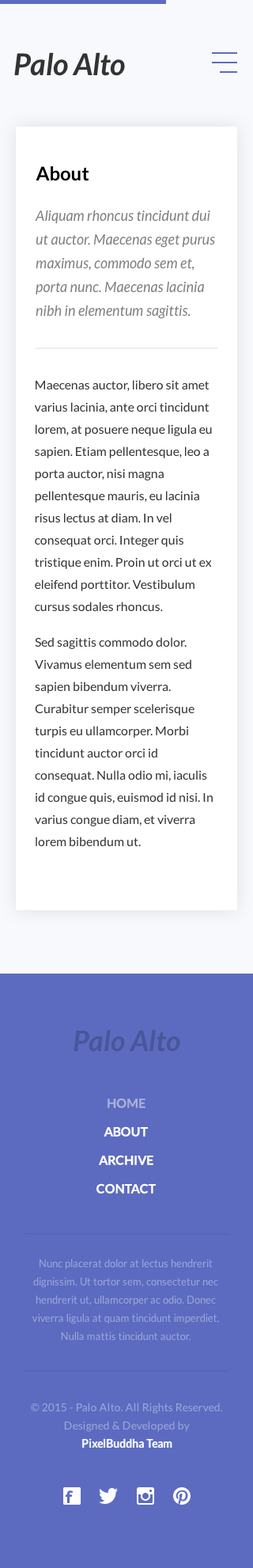
<style>
.page{position:relative;width:253px;height:1568px;background:#ffffff}
.page>*{position:absolute;margin:0}
.t1{font:30.1px "Lato-BoldItalic";color:#333333}
.t2{font:19px "Lato-Bold";color:#000000}
.t3{font:14.2px/23.7px "Lato-Italic";color:#7f7f7f}
.t4{font:12.7px/22.2px "Lato-Regular";color:#333333}
.t5{font:28.5px "Lato-BoldItalic";color:#4a569a}
.t6{font:12.7px "Lato-Bold";color:#a9afdb;text-transform:uppercase}
.t7{font:12.7px/28.5px "Lato-Bold";color:#ffffff;text-transform:uppercase}
.t8{font:10.3px/18.2px "Lato-Regular";color:#9da6d9}
.t9{font:11.1px/18.2px "Lato-Regular"}
.t10{font:11.1px/18.2px "Lato-Bold"}
.t11{font:11.1px "Lato-Bold";color:#ffffff}
</style>
<div class="page">
<p class="t1" style="left:14px;top:52px;width:111px;height:24px">Palo Alto</p>
<p class="t2" style="left:36px;top:166px;width:53px;height:15px">About</p>
<p class="t3" style="left:35px;top:210px;width:180px;height:109px">Aliquam rhoncus tincidunt dui ut auctor. Maecenas eget purus maximus, commodo sem et, porta nunc. Maecenas lacinia nibh in elementum sagittis.</p>
<p class="t4" style="left:34px;top:380px;width:178px;height:232px">Maecenas auctor, libero sit amet varius lacinia, ante orci tincidunt lorem, at posuere neque ligula eu sapien. Etiam pellentesque, leo a porta auctor, nisi magna pellentesque mauris, eu lacinia risus lectus at diam. In vel consequat orci. Integer quis tristique enim. Proin ut orci ut ex eleifend porttitor. Vestibulum cursus sodales rhoncus.</p>
<p class="t4" style="left:35px;top:637px;width:178px;height:210px">Sed sagittis commodo dolor. Vivamus elementum sem sed sapien bibendum viverra. Curabitur semper scelerisque turpis eu ullamcorper. Morbi tincidunt auctor orci id consequat. Nulla odio mi, iaculis id congue quis, euismod id nisi. In varius congue diam, et viverra lorem bibendum ut.</p>
<p class="t5" style="left:74px;top:1030px;width:106px;height:22px">Palo Alto</p>
<p class="t6" style="left:108px;top:1098px;width:38px;height:10px">home</p>
<p class="t7" style="left:97px;top:1126px;width:59px;height:68px;text-align:center">about<br>archive<br>contact</p>
<p class="t8" style="left:32px;top:1259px;width:187px;height:82px;text-align:center">Nunc placerat dolor at lectus hendrerit dignissim. Ut tortor sem, consectetur nec hendrerit ut, ullamcorper ac odio. Donec viverra ligula at quam tincidunt imperdiet. Nulla mattis tincidunt auctor.</p>
<p class="t9" style="left:31px;top:1403px;width:191px;height:45px;text-align:center">© 2015 - Palo Alto. All Rights Reserved. Designed &amp; Developed by <br><span class="t10">PixelBuddha Team</span></p>
<p class="t11" style="left:82px;top:1438px;width:91px;height:10px">PixelBuddha Team</p>
</div>
